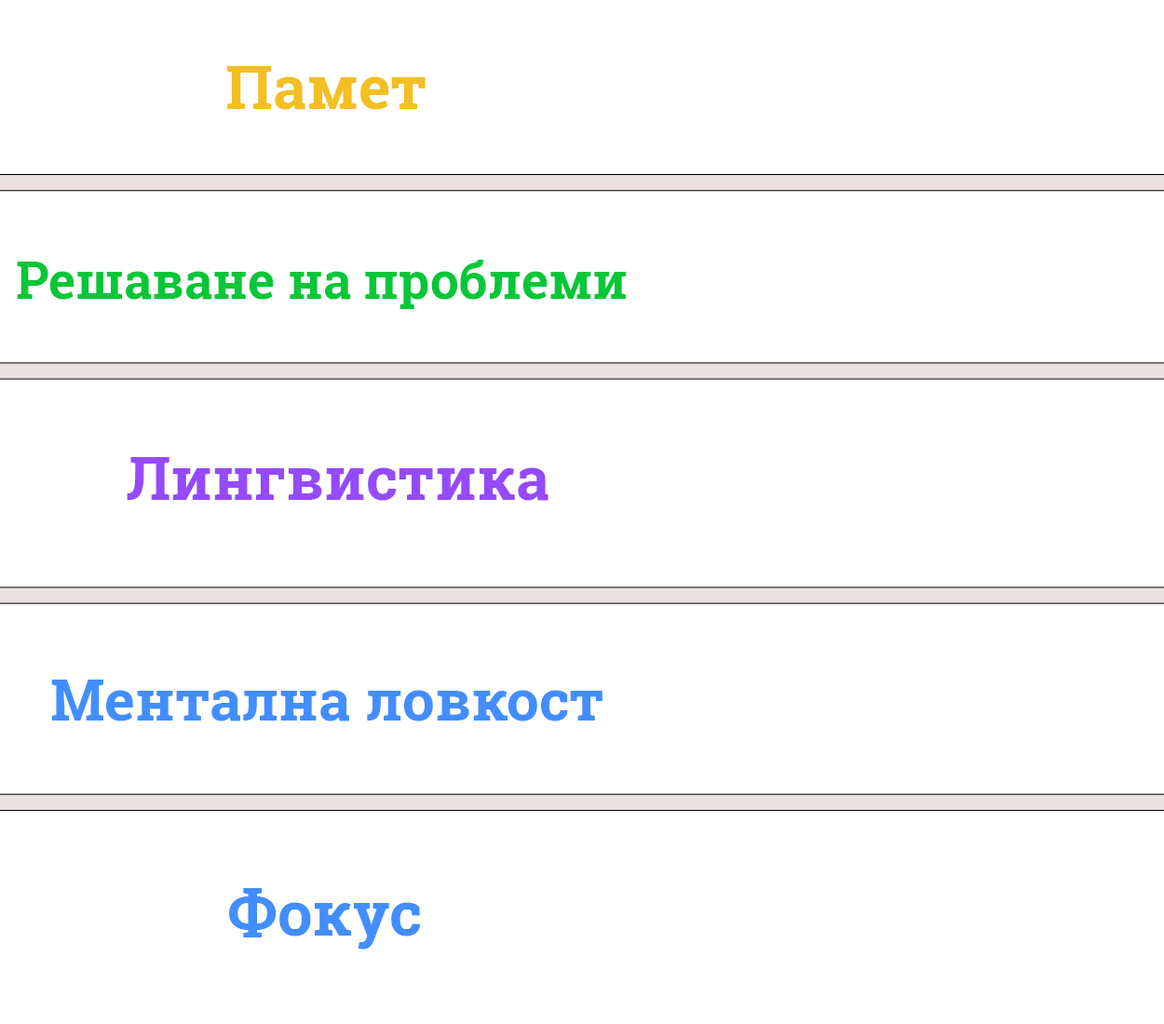
<style>
.page{position:relative;width:1164px;height:1024px;background:#ffffff}
.page>*{position:absolute;margin:0}
.t1{font:60.5px "RobotoSlab-Bold";color:#f3bf21}
.t2{font:51.2px "RobotoSlab-Bold";color:#06c738}
.t3{font:60.5px "RobotoSlab-Bold";color:#954afb}
.t4{font:57.7px "RobotoSlab-Bold";color:#428eff}
.t5{font:62.4px "RobotoSlab-Bold";color:#428eff}
</style>
<div class="page">
<p class="t1" style="left:227px;top:66px;width:199px;height:44px">Памет</p>
<p class="t2" style="left:17px;top:260px;width:609px;height:49px">Решаване на проблеми</p>
<p class="t3" style="left:127px;top:457px;width:422px;height:44px">Лингвистика</p>
<p class="t4" style="left:51px;top:680px;width:552px;height:42px">Ментална ловкост</p>
<p class="t5" style="left:229px;top:888px;width:191px;height:62px">Фокус</p>
</div>
